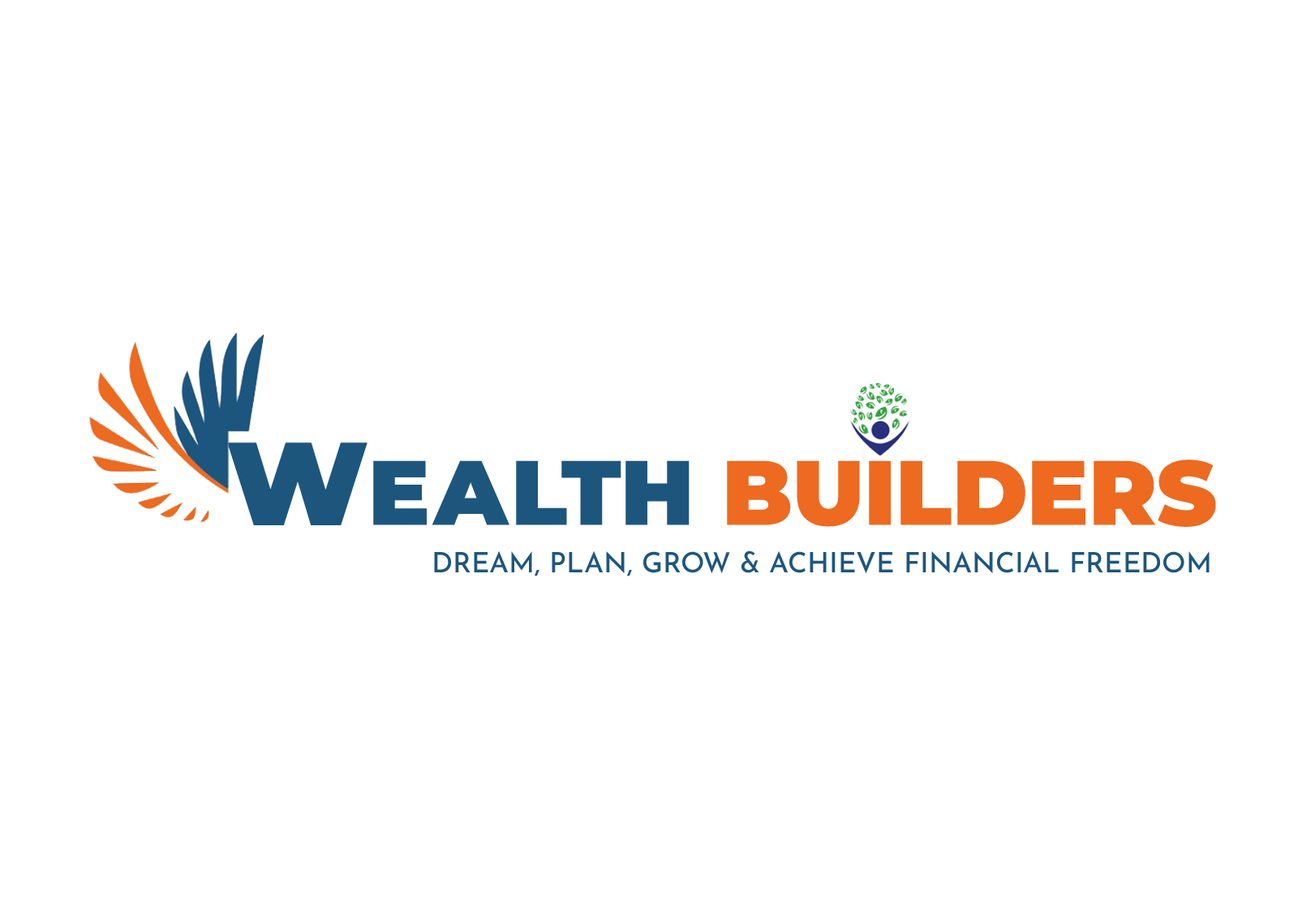
<style>
.page{position:relative;width:1298px;height:919px;background:#ffffff}
.page>*{position:absolute;margin:0}
.t1{font:91.3px "Montserrat-Black";color:#ed6a20;text-transform:uppercase}
.t2{font:117.8px "Montserrat-Black";color:#1d567d;text-transform:uppercase}
.t3{font:91.3px "Montserrat-Black";letter-spacing:0.04em;color:#1d567d;text-transform:uppercase}
.t4{font:91.3px "Montserrat-Black";color:#1d567d;text-transform:uppercase}
.t5{font:27.9px "JosefinSans-Medium";color:#1d567d;text-transform:uppercase}
</style>
<div class="page">
<p class="t1" style="left:227px;top:442px;width:989px;height:85px"><span class="t2">W</span><span class="t3">ea</span><span class="t4">lth</span> BUILDERS</p>
<p class="t5" style="left:434px;top:550px;width:776px;height:26px">Dream, Plan, Grow &amp; Achieve Financial Freedom</p>
</div>
